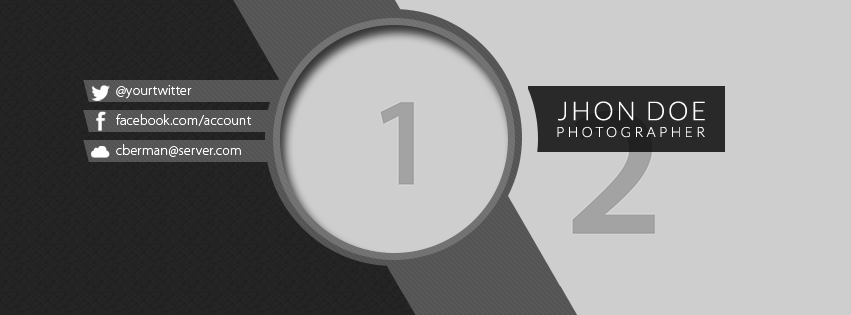
<style>
.page{position:relative;width:851px;height:315px;background:#cecece}
.page>*{position:absolute;margin:0}
.t1{font:14.6px "MyriadPro-Light";letter-spacing:0.01em;color:#ffffff}
.t2{font:26px "Lato-Light";letter-spacing:0.1em;color:#ffffff;text-transform:uppercase}
.t3{font:14px "Lato-Light";letter-spacing:0.24em;color:#ffffff;text-transform:uppercase}
</style>
<div class="page">
<p class="t1" style="left:116px;top:85px;width:76px;height:14px">@yourtwitter</p>
<p class="t2" style="left:558px;top:101px;width:147px;height:20px">JHON DOE</p>
<p class="t1" style="left:116px;top:114px;width:136px;height:12px">facebook.com/account</p>
<p class="t3" style="left:557px;top:126px;width:148px;height:12px">PHOTOGRAPHER</p>
<p class="t1" style="left:116px;top:144px;width:125px;height:13px">cberman@server.com</p>
</div>
